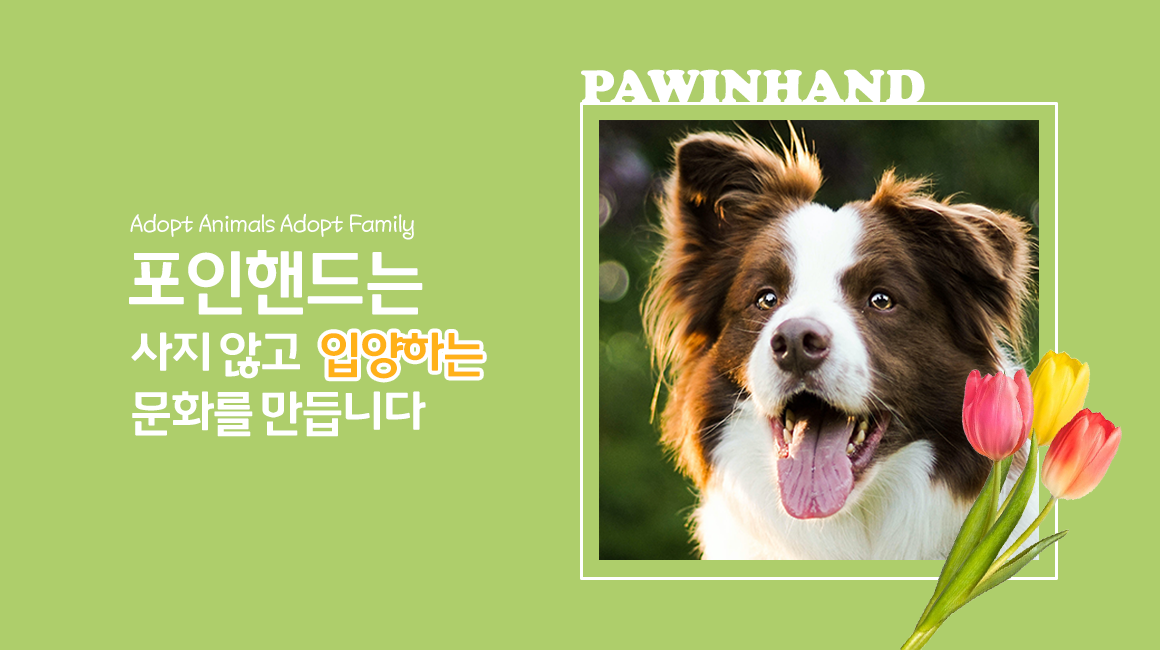
<style>
.page{position:relative;width:1160px;height:650px;background:#aece6b}
.page>*{position:absolute;margin:0}
.t1{font:50px "CooperBlack";color:#ffffff;text-transform:uppercase}
.t2{font:28px "KNPSKkomi-Regular";letter-spacing:-0.04em;color:#ffffff}
.t3{font:69.7px "ChungbukNationalUniversity-Bold";letter-spacing:-0.04em;color:#ffffff;text-transform:uppercase}
.t4{font:48.3px/59px "ChungbukNationalUniversity-Bold";letter-spacing:-0.04em;color:#ffffff}
.t5{font:48.3px "ChungbukNationalUniversity-Bold";letter-spacing:-0.04em;color:#ffb119}
</style>
<div class="page">
<p class="t1" style="left:581px;top:69px;width:344px;height:36px">pawinhand</p>
<p class="t2" style="left:130px;top:213px;width:284px;height:27px">Adopt Animals Adopt Family</p>
<p class="t3" style="left:129px;top:250px;width:294px;height:65px">포인핸드는</p>
<p class="t4" style="left:131px;top:332px;width:295px;height:105px">사지 않고 <br>문화를 만듭니다</p>
<p class="t5" style="left:321px;top:332px;width:162px;height:47px">입양하는</p>
</div>
